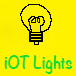
<style>
.page{position:relative;width:76px;height:76px;background:#fff200}
.page>*{position:absolute;margin:0}
.t1{font:16px "Noteworthy-Bold";color:#16dc32}
</style>
<div class="page">
<p class="t1" style="left:4px;top:55px;width:69px;height:19px">iOT Lights</p>
</div>
